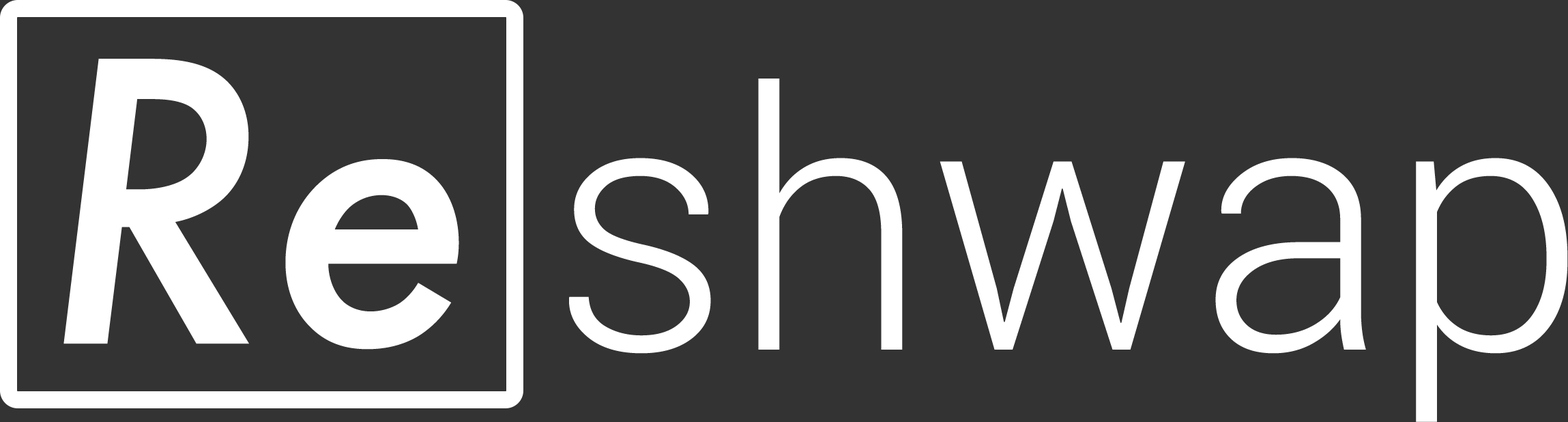
<style>
.page{position:relative;width:1568px;height:422px;background:#333333}
.page>*{position:absolute;margin:0}
.t1{font:426.5px "FuturaPT-MediumObl";color:#ffffff}
.t2{font:426.5px "FuturaPT-DemiObl";color:#ffffff}
.t3{font:355.4px "Roboto-Light";color:#ffffff}
</style>
<div class="page">
<p class="t1" style="left:63px;top:59px;width:396px;height:290px"><span class="t2"><br></span>Re</p>
<p class="t3" style="left:569px;top:78px;width:999px;height:344px">shwap</p>
</div>
